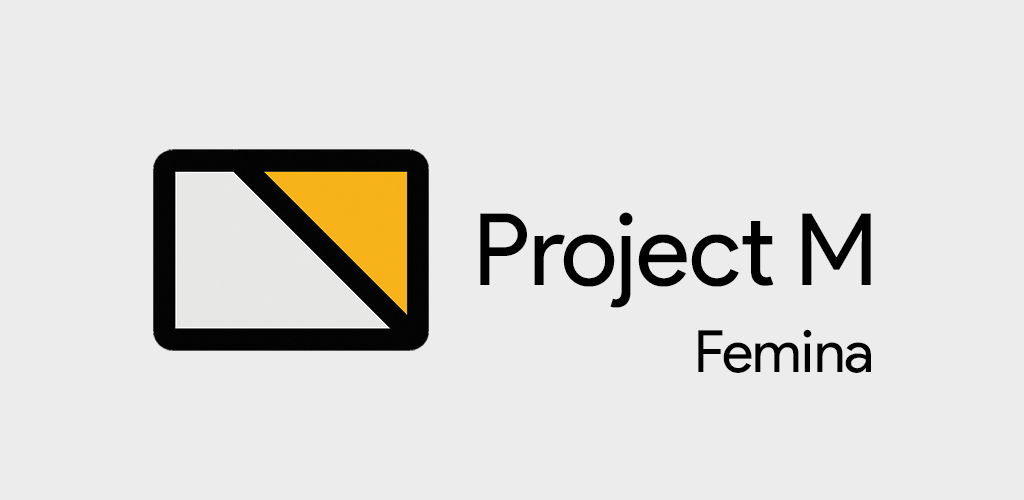
<style>
.page{position:relative;width:1024px;height:500px;background:#ececec}
.page>*{position:absolute;margin:0}
.t1{font:100px "ProductSans-Regular";letter-spacing:-0.01em;color:#000000}
</style>
<div class="page">
<p class="t1" style="left:480px;top:212px;width:391px;height:161px">Project M<br>                  Femina</p>
</div>
